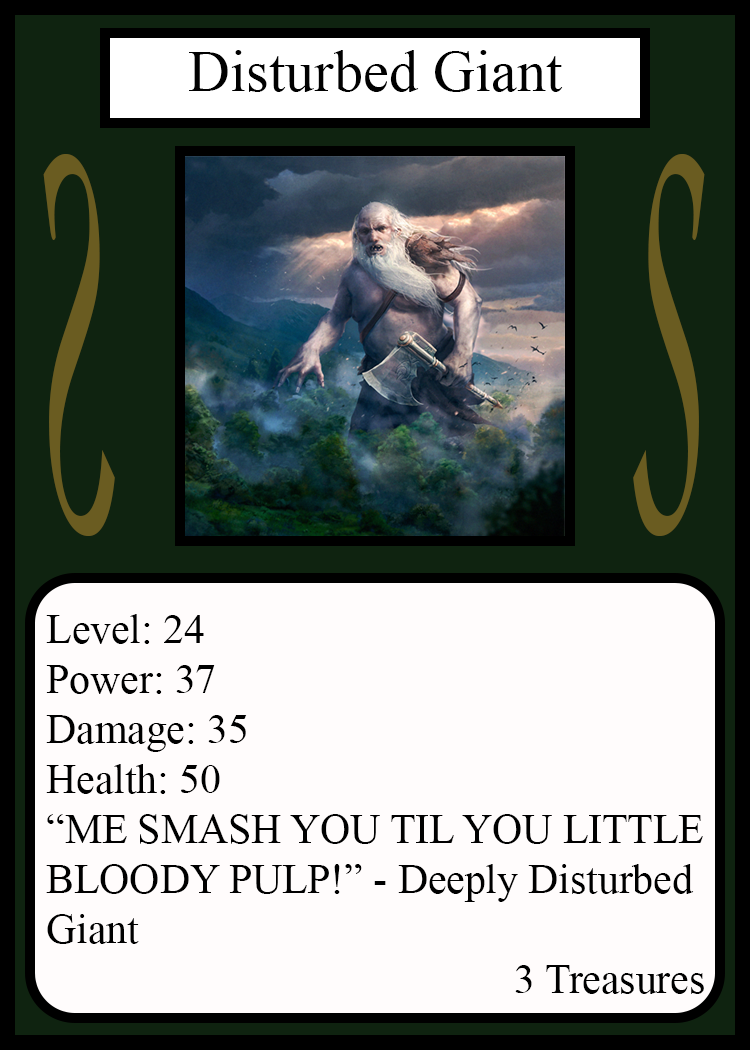
<style>
.page{position:relative;width:750px;height:1050px;background:#fffcfc}
.page>*{position:absolute;margin:0}
.t1{font:58.3px "TimesNewRomanPSMT";color:#010101}
.t2{font:548.5px "Apple-Chancery";color:#6a5c21;scale:0.27 1}
.t3{font:548.2px "Apple-Chancery";color:#6a5c21;scale:0.27 1}
.t4{font:41.7px "TimesNewRomanPSMT";color:#000000}
</style>
<div class="page">
<p class="t1" style="left:189px;top:50px;width:374px;height:42px">Disturbed Giant</p>
<p class="t2" style="left:43px;top:154px;width:72px;height:382px;rotate:180deg">S</p>
<p class="t3" style="left:633px;top:154px;width:72px;height:382px">S</p>
<p class="t4" style="left:46px;top:614px;width:658px;height:380px">Level: 24<br>Power: 37<br>Damage: 35<br>Health: 50<br>“ME SMASH YOU TIL YOU LITTLE<br>BLOODY PULP!” - Deeply Disturbed<br>Giant<br>             3 Treasures</p>
</div>
